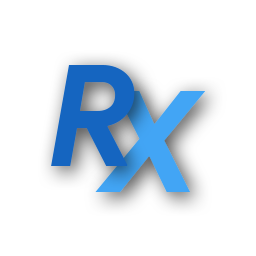
<style>
.page{position:relative;width:256px;height:256px;background:#ffffff}
.page>*{position:absolute;margin:0}
.t1{font:141px "ProductSans-BoldItalic";letter-spacing:-0.22em;color:#1565c0}
.t2{font:141px "ProductSans-BoldItalic";letter-spacing:-0.22em;color:#42a5f5}
</style>
<div class="page">
<p class="t1" style="left:51px;top:65px;width:84px;height:101px">R</p>
<p class="t2" style="left:95px;top:91px;width:111px;height:101px">X</p>
</div>
